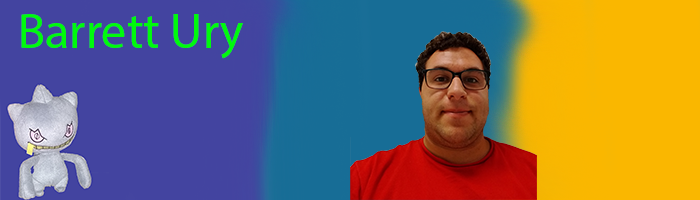
<style>
.page{position:relative;width:700px;height:200px;background:#4344a0}
.page>*{position:absolute;margin:0}
.t1{font:50px "MyriadPro-Regular";color:#00fa0c}
</style>
<div class="page">
<p class="t1" style="left:21px;top:14px;width:222px;height:45px">Barrett Ury</p>
</div>
